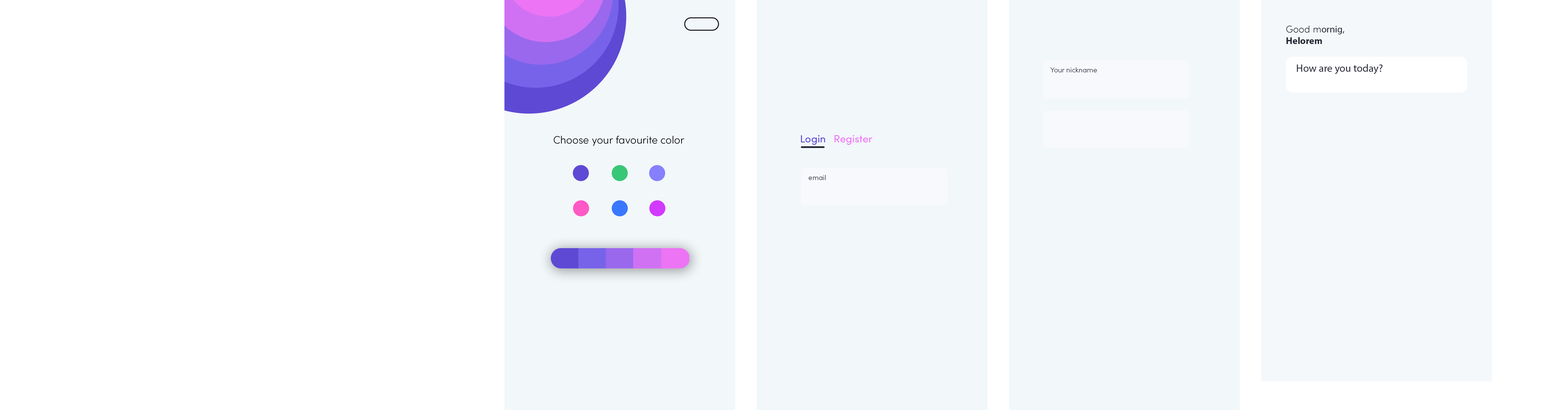
<style>
.page{position:relative;width:1568px;height:410px;background:#ffffff}
.page>*{position:absolute;margin:0}
.t1{font:9.6px "MyriadPro-Bold";color:#242633}
.t2{font:9.6px "SofiaPro-Light";color:#242633}
.t3{font:9.6px "MyriadPro-Regular";color:#242633}
.t4{font:10.5px "MyriadPro-Regular";color:#242633}
.t5{font:7px "SofiaPro-Light";color:#242633}
.t6{font:10.5px "SofiaPro-Light";color:#000000}
.t7{font:10.5px "SofiaProSoftW01-Regular";color:#5e49d4}
.t8{font:10.5px "SofiaProSoftW01-Regular";color:#ed74f5}
</style>
<div class="page">
<p class="t1" style="left:1286px;top:26px;width:58px;height:18px"><span class="t2">Good m</span><span class="t3">ornig,<br></span>Helorem</p>
<p class="t4" style="left:1297px;top:64px;width:85px;height:10px">How are you today?</p>
<p class="t5" style="left:1050px;top:67px;width:47px;height:5px">Your nickname</p>
<p class="t6" style="left:554px;top:136px;width:130px;height:10px">Choose your favourite color</p>
<p class="t7" style="left:801px;top:135px;width:24px;height:10px">Login</p>
<p class="t8" style="left:834px;top:135px;width:38px;height:10px">Register</p>
<p class="t5" style="left:809px;top:175px;width:17px;height:5px">email</p>
</div>
